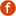
<style>
.page{position:relative;width:16px;height:16px;background:#d1450d}
.page>*{position:absolute;margin:0}
.t1{font:12px "ComicSansMS-Bold";color:#ffffff}
</style>
<div class="page">
<p class="t1" style="left:5px;top:2px;width:6px;height:11px">f</p>
</div>
